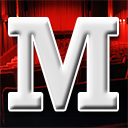
<style>
.page{position:relative;width:128px;height:128px}
.page>*{position:absolute;margin:0}
.t1{font:133.1px "Rockwell-Bold";scale:0.82 1}
</style>
<div class="page">
<p class="t1" style="left:10px;top:19px;width:107px;height:91px">M</p>
</div>
